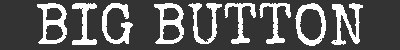
<style>
.page{position:relative;width:400px;height:50px;background:#333333}
.page>*{position:absolute;margin:0}
.t1{font:58.3px "SpecialElite-Regular";color:#ffffff}
</style>
<div class="page">
<p class="t1" style="left:37px;top:3px;width:326px;height:43px">BIG BUTTON</p>
</div>
